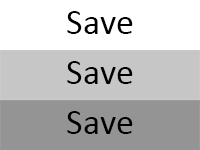
<style>
.page{position:relative;width:200px;height:150px;background:#ffffff}
.page>*{position:absolute;margin:0}
.t1{font:36px "Calibri";color:#000000}
</style>
<div class="page">
<p class="t1" style="left:67px;top:11px;width:66px;height:23px">Save</p>
<p class="t1" style="left:67px;top:61px;width:66px;height:23px">Save</p>
<p class="t1" style="left:67px;top:111px;width:66px;height:23px">Save</p>
</div>
